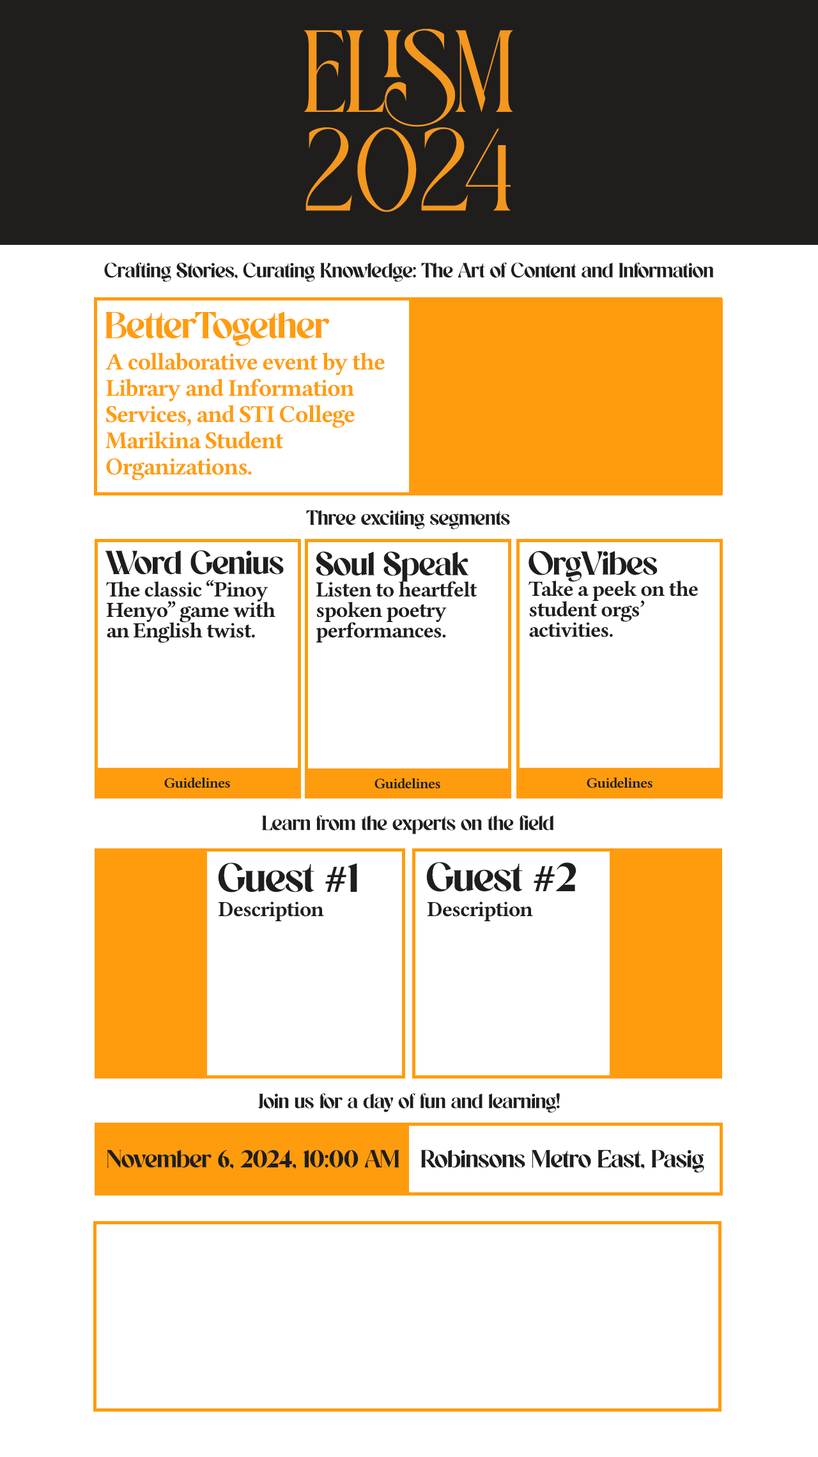
<style>
.page{position:relative;width:818px;height:1457px;background:#ffffff}
.page>*{position:absolute;margin:0}
.t1{font:116.4px/98.5px "FRISTARegular";letter-spacing:-0.04em;color:#f3971f}
.t2{font:23px "Meditative";letter-spacing:-0.04em;color:#1f1e1d}
.t3{font:41.6px "Meditative";letter-spacing:-0.04em;color:#ff9c0e}
.t4{font:24.3px/26.2px "LinLibertineB";letter-spacing:-0.04em;color:#ff9c0e}
.t5{font:37.1px "Meditative";letter-spacing:-0.04em;color:#1f1e1d}
.t6{font:21.7px/20.5px "LinLibertineB";letter-spacing:-0.04em;color:#1f1e1d}
.t7{font:14.7px "LinLibertineB";letter-spacing:-0.04em;color:#1f1e1d}
.t8{font:45.4px "Meditative";letter-spacing:-0.04em;color:#1f1e1d}
.t9{font:21.7px "LinLibertineB";letter-spacing:-0.04em;color:#1f1e1d}
.t10{font:27.5px "Meditative";letter-spacing:-0.04em;color:#1f1e1d}
</style>
<div class="page">
<p class="t1" style="left:304px;top:29px;width:209px;height:183px;text-align:center">ELISM<br>2024</p>
<p class="t2" style="left:104px;top:262px;width:610px;height:20px">Crafting Stories, Curating Knowledge: The Art of Content and Information</p>
<p class="t3" style="left:105px;top:311px;width:225px;height:35px">BetterTogether</p>
<p class="t4" style="left:105px;top:352px;width:280px;height:128px">A collaborative event by the<br>Library and Information<br>Services, and STI College<br>Marikina Student <br>Organizations.</p>
<p class="t2" style="left:306px;top:510px;width:204px;height:19px">Three exciting segments</p>
<p class="t5" style="left:105px;top:550px;width:179px;height:25px">Word Genius</p>
<p class="t5" style="left:316px;top:551px;width:153px;height:31px">Soul Speak</p>
<p class="t5" style="left:529px;top:550px;width:129px;height:32px">OrgVibes</p>
<p class="t6" style="left:106px;top:580px;width:170px;height:63px">The classic “Pinoy<br>Henyo” game with<br>an English twist.</p>
<p class="t6" style="left:316px;top:581px;width:161px;height:62px">Listen to heartfelt<br>spoken poetry<br>performances.</p>
<p class="t6" style="left:529px;top:581px;width:169px;height:56px">Take a peek on the<br>student orgs’<br>activities.</p>
<p class="t7" style="left:164px;top:777px;width:66px;height:11px">Guidelines</p>
<p class="t7" style="left:375px;top:778px;width:66px;height:11px">Guidelines</p>
<p class="t7" style="left:587px;top:777px;width:66px;height:11px">Guidelines</p>
<p class="t2" style="left:262px;top:815px;width:292px;height:19px">Learn from the experts on the field</p>
<p class="t8" style="left:218px;top:862px;width:139px;height:31px">Guest #1</p>
<p class="t8" style="left:426px;top:862px;width:151px;height:30px">Guest #2</p>
<p class="t9" style="left:218px;top:901px;width:106px;height:20px">Description</p>
<p class="t9" style="left:427px;top:901px;width:106px;height:20px">Description</p>
<p class="t2" style="left:258px;top:1093px;width:302px;height:20px">Join us for a day of fun and learning!</p>
<p class="t10" style="left:107px;top:1150px;width:293px;height:19px">November 6, 2024, 10:00 AM</p>
<p class="t10" style="left:421px;top:1150px;width:284px;height:23px">Robinsons Metro East, Pasig</p>
</div>
